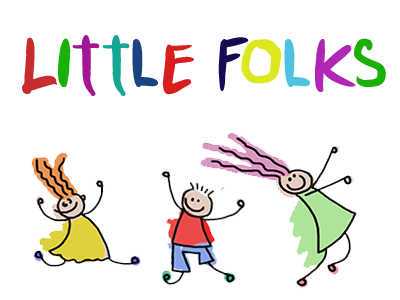
<style>
.page{position:relative;width:400px;height:300px;background:#ffffff}
.page>*{position:absolute;margin:0}
.t1{font:61.4px "Punkboy";color:#c82c2c;scale:1.09 1}
.t2{font:61.4px "Punkboy";color:#1bb008;scale:1.09 1}
.t3{font:61.4px "Punkboy";color:#a21593;scale:1.09 1}
.t4{font:61.4px "Punkboy";color:#15a794;scale:1.09 1}
.t5{font:61.4px "Punkboy";color:#1a4380;scale:1.09 1}
.t6{font:61.4px "Punkboy";color:#d91e1e;scale:1.09 1}
.t7{font:61.4px "Punkboy";color:#170b53;scale:1.09 1}
.t8{font:61.4px "Punkboy";color:#dbe71f;scale:1.09 1}
.t9{font:61.4px "Punkboy";color:#4dc3e1;scale:1.09 1}
.t10{font:61.4px "Punkboy";color:#b026b5;scale:1.09 1}
</style>
<div class="page">
<p class="t1" style="left:22px;top:35px;width:364px;height:61px">L<span class="t2">i</span><span class="t3">t</span><span class="t4">t</span><span class="t5">l</span><span class="t6">e </span><span class="t7">F</span><span class="t8">o</span><span class="t9">l</span><span class="t10">k</span><span class="t2">s</span></p>
</div>
